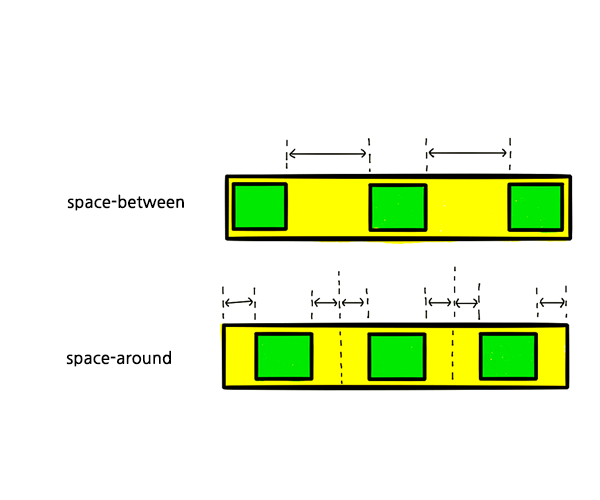
<style>
.page{position:relative;width:600px;height:500px;background:#ffffff}
.page>*{position:absolute;margin:0}
.t1{font:16px "NanumGothic";color:#010101;font-weight:bold}
</style>
<div class="page">
<p class="t1" style="left:67px;top:194px;width:117px;height:17px">space-between</p>
<p class="t1" style="left:66px;top:350px;width:105px;height:17px">space-around</p>
</div>
